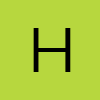
<style>
.page{position:relative;width:100px;height:100px;background:#b7d73e}
.page>*{position:absolute;margin:0}
.t1{font:62.5px "Muli-Regular";color:#000000}
</style>
<div class="page">
<p class="t1" style="left:33px;top:28px;width:38px;height:44px">H</p>
</div>
